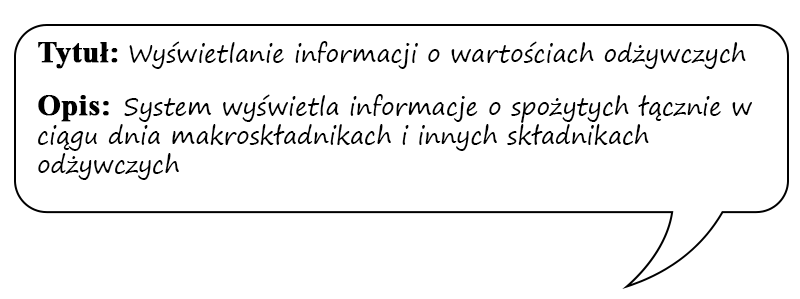
<style>
.page{position:relative;width:800px;height:299px;background:#ffffff}
.page>*{position:absolute;margin:0}
.t1{font:24px "SegoePrint";color:#000000}
.t2{font:30px "TimesNewRomanPS-BoldMT";color:#000000;font-weight:bold}
</style>
<div class="page">
<p class="t1" style="left:38px;top:41px;width:714px;height:139px"><span class="t2">Tytuł: </span>Wyświetlanie informacji o wartościach odżywczych<br><br><span class="t2">Opis:  </span>System wyświetla informacje o spożytych łącznie w ciągu dnia makroskładnikach i innych składnikach odżywczych</p>
</div>
